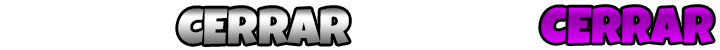
<style>
.page{position:relative;width:720px;height:50px;background:#ffffff}
.page>*{position:absolute;margin:0}
.t1{font:50px "LuckiestGuy-Regular"}
</style>
<div class="page">
<p class="t1" style="left:178px;top:8px;width:171px;height:36px">CERRAR</p>
<p class="t1" style="left:541px;top:7px;width:172px;height:36px">CERRAR</p>
</div>
